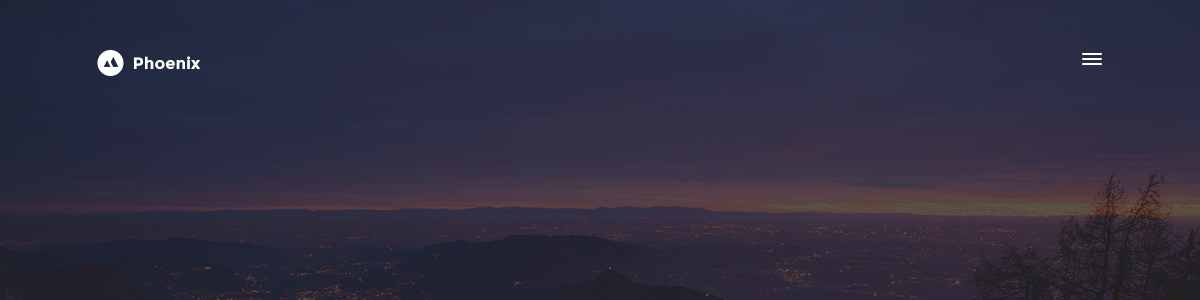
<style>
.page{position:relative;width:1200px;height:300px}
.page>*{position:absolute;margin:0}
.t1{font:16.4px "Montserrat-Bold";color:#ffffff}
</style>
<div class="page">
<p class="t1" style="left:134px;top:56px;width:66px;height:13px">Phoenix</p>
</div>
